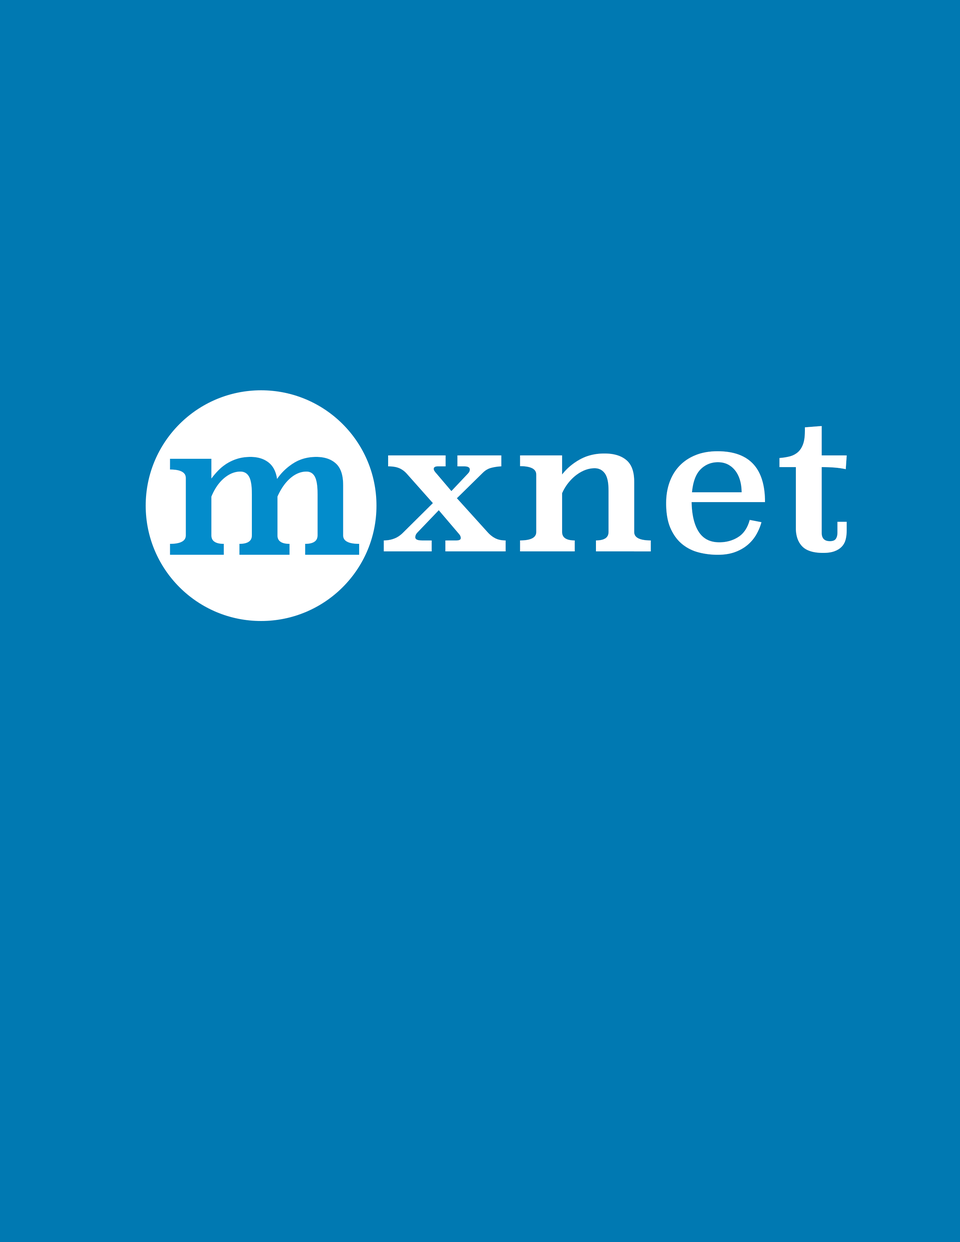
<style>
.page{position:relative;width:960px;height:1242px;background:#0079b2}
.page>*{position:absolute;margin:0}
.t1{font:188.2px "Superclarendon-Regular";color:#ffffff}
.t2{font:188.2px "Superclarendon-Regular";color:#038ccb}
</style>
<div class="page">
<p class="t1" style="left:384px;top:426px;width:463px;height:129px">xnet</p>
<p class="t2" style="left:170px;top:457px;width:189px;height:98px">m</p>
</div>
